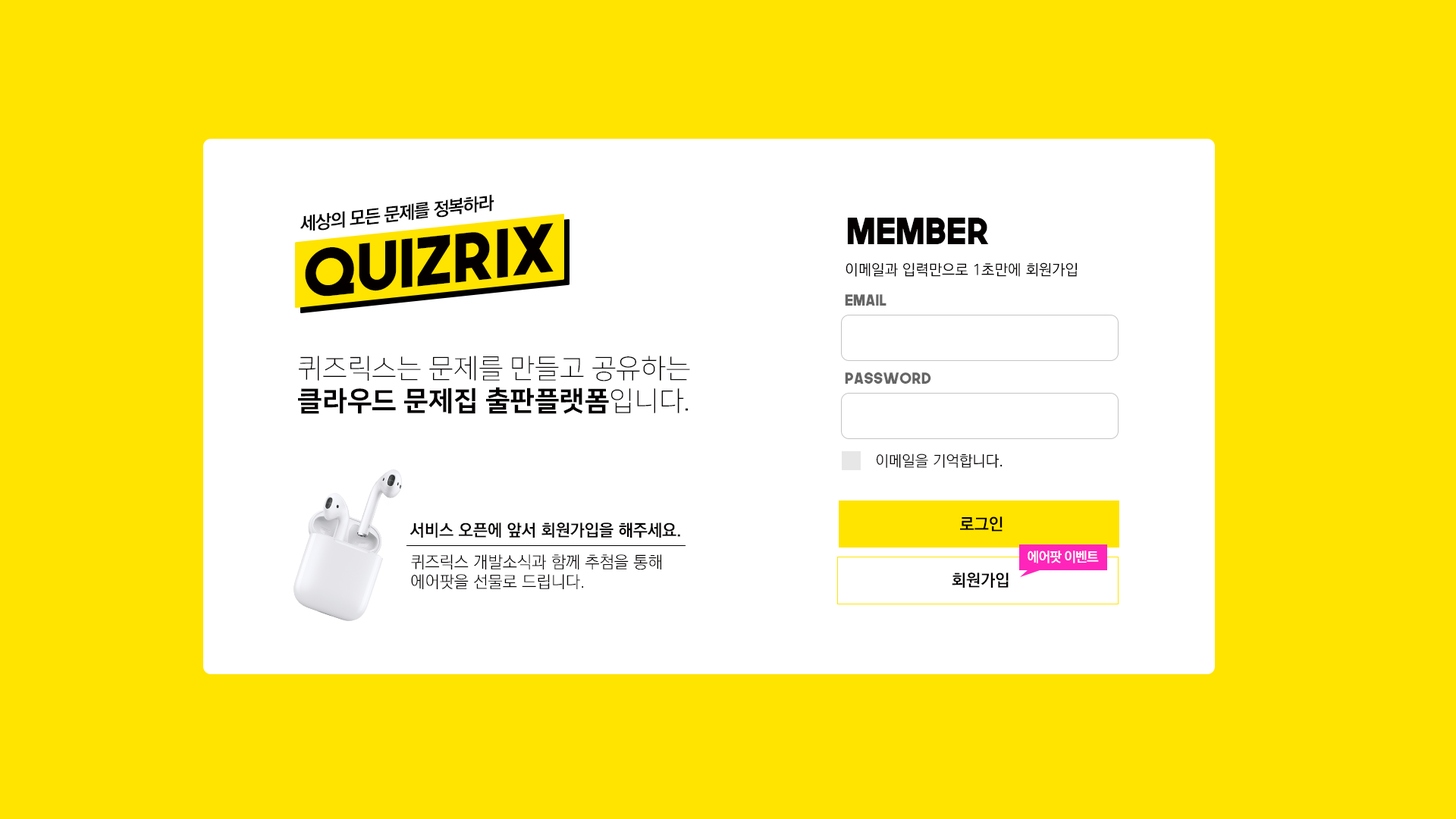
<style>
.page{position:relative;width:1456px;height:819px;background:#ffe400}
.page>*{position:absolute;margin:0}
.t1{font:18.2px "KoPubDotumBold";letter-spacing:-0.05em;color:#000000}
.t2{font:36.4px "TheNextFont";color:#040000}
.t3{font:66px "TheNextFont";color:#040000}
.t4{font:15.2px "KoPubDotumMedium";color:#040000}
.t5{font:15.2px "TheNextFont";color:#666666}
.t6{font:27.3px "NanumSquareL";color:#040000}
.t7{font:27.3px "NanumSquareEB";color:#040000}
.t8{font:15.2px "KoPubDotumLight";color:#040000}
.t9{font:16.7px "KoPubDotumBold";color:#040000}
.t10{font:16.7px "KoPubDotumLight";color:#040000}
.t11{font:13.6px "KoPubDotumBold";letter-spacing:-0.05em;color:#ffffff}
</style>
<div class="page">
<p class="t1" style="left:300px;top:194px;width:194px;height:37px;rotate:-6deg">세상의 모든 문제를 정복하라</p>
<p class="t2" style="left:847px;top:218px;width:142px;height:26px">member</p>
<p class="t3" style="left:305px;top:223px;width:249px;height:74px;rotate:-6deg">QuizriX</p>
<p class="t4" style="left:846px;top:262px;width:231px;height:15px">이메일과 입력만으로 1초만에 회원가입</p>
<p class="t5" style="left:845px;top:294px;width:41px;height:12px">Email</p>
<p class="t6" style="left:298px;top:356px;width:392px;height:58px">퀴즈릭스는 문제를 만들고 공유하는<br><span class="t7">클라우드 문제집 출판플랫폼</span>입니다.</p>
<p class="t5" style="left:845px;top:372px;width:86px;height:12px">password</p>
<p class="t8" style="left:876px;top:453px;width:127px;height:15px">이메일을 기억합니다.</p>
<p class="t9" style="left:960px;top:516px;width:43px;height:16px">로그인</p>
<p class="t9" style="left:409px;top:522px;width:271px;height:16px">서비스 오픈에 앞서 회원가입을 해주세요.</p>
<p class="t10" style="left:411px;top:554px;width:250px;height:35px">퀴즈릭스 개발소식과 함께 추첨을 통해 <br>에어팟을 선물로 드립니다.</p>
<p class="t11" style="left:1028px;top:551px;width:71px;height:12px">에어팟 이벤트</p>
<p class="t9" style="left:952px;top:573px;width:57px;height:15px">회원가입</p>
</div>
